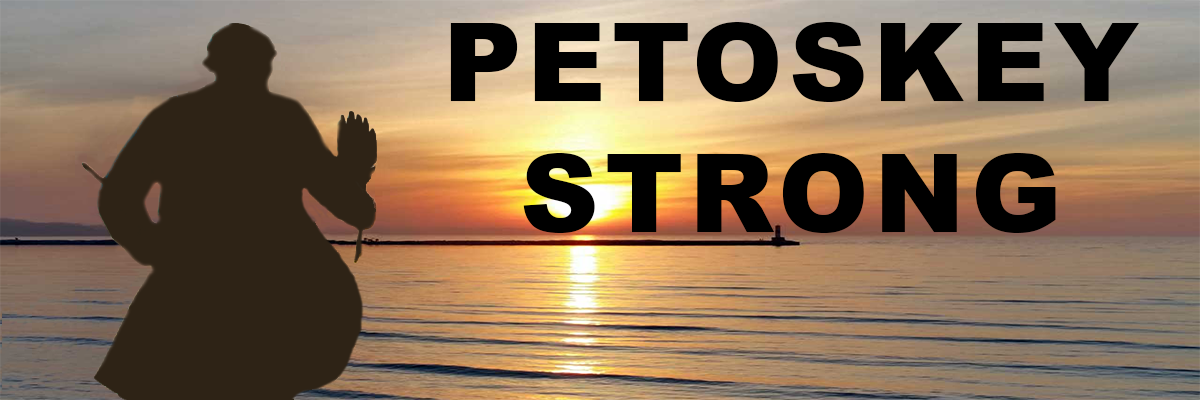
<style>
.page{position:relative;width:1200px;height:400px}
.page>*{position:absolute;margin:0}
.t1{font:109.3px "Arial-Black";letter-spacing:0.05em;color:#000000}
</style>
<div class="page">
<p class="t1" style="left:450px;top:22px;width:690px;height:211px;text-align:center">PETOSKEY<br>STRONG</p>
</div>
